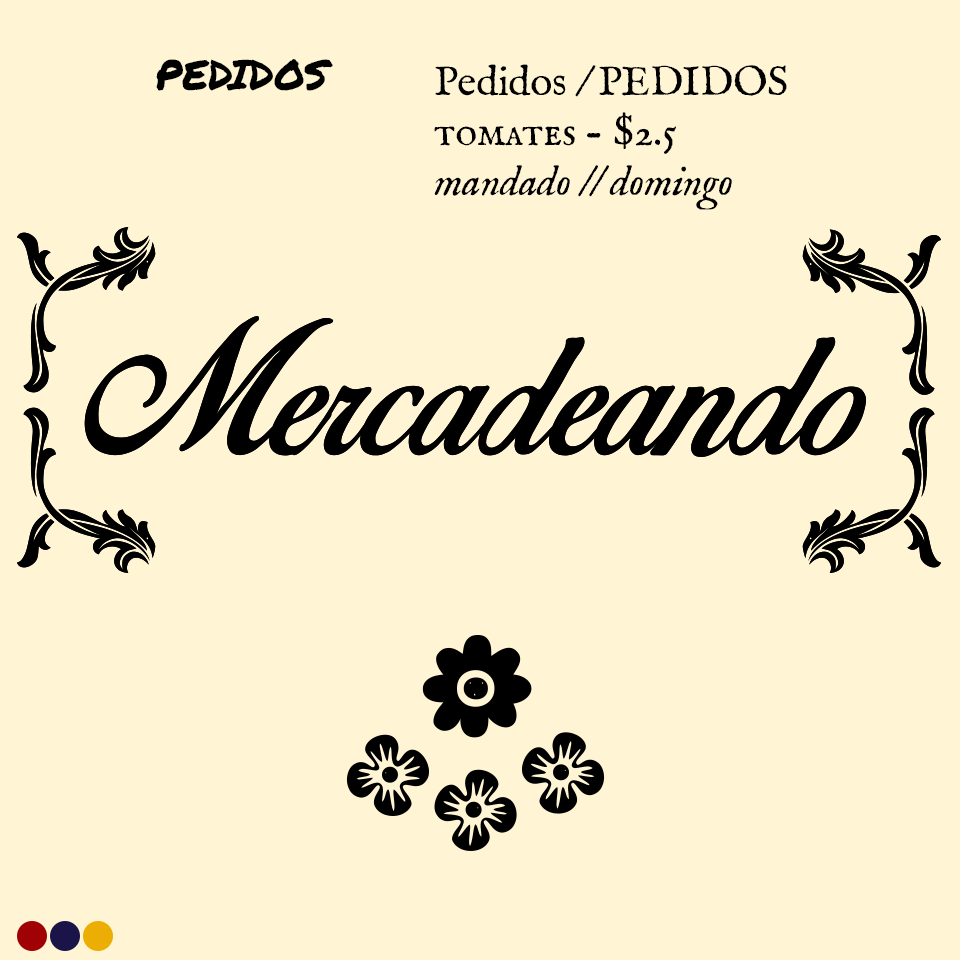
<style>
.page{position:relative;width:960px;height:960px;background:#fff5d4}
.page>*{position:absolute;margin:0}
.t1{font:41.7px "PermanentMarker";letter-spacing:-0.005em;color:#000000}
.t2{font:41.7px "IM_FELL_English_Italic";letter-spacing:-0.01em;color:#000000}
.t3{font:41.7px "IM_FELL_English_Roman";letter-spacing:-0.01em;color:#000000}
.t4{font:41.7px "IM_FELL_English_SC";letter-spacing:-0.01em;color:#000000}
</style>
<div class="page">
<p class="t1" style="left:156px;top:59px;width:177px;height:32px">PEDIDOS</p>
<p class="t2" style="left:434px;top:64px;width:353px;height:146px"><span class="t3">Pedidos / PEDIDOS<br></span><span class="t4">tomates - $2.5<br></span>mandado // domingo</p>
</div>
